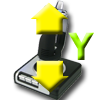
<style>
.page{position:relative;width:100px;height:100px;background:#ffffff}
.page>*{position:absolute;margin:0}
.t1{font:37.5px "Tahoma-Bold"}
</style>
<div class="page">
<p class="t1" style="left:68px;top:32px;width:26px;height:28px">Y</p>
</div>
